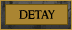
<style>
.page{position:relative;width:72px;height:30px;background:#aa8532}
.page>*{position:absolute;margin:0}
.t1{font:14px "RingbearerMedium";letter-spacing:0.005em;color:#000000}
</style>
<div class="page">
<p class="t1" style="left:19px;top:10px;width:36px;height:9px">detay</p>
<p class="t1" style="left:19px;top:10px;width:36px;height:9px">detay</p>
</div>
